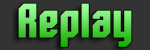
<style>
.page{position:relative;width:150px;height:50px;background:#333333}
.page>*{position:absolute;margin:0}
.t1{font:47.9px "Whitestone-Bold"}
</style>
<div class="page">
<p class="t1" style="left:18px;top:3px;width:114px;height:44px">Replay</p>
</div>
